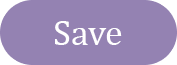
<style>
.page{position:relative;width:177px;height:65px;background:#9482b2}
.page>*{position:absolute;margin:0}
.t1{font:36px "Cambria";color:#ffffff}
</style>
<div class="page">
<p class="t1" style="left:55px;top:21px;width:67px;height:24px">Save</p>
</div>
